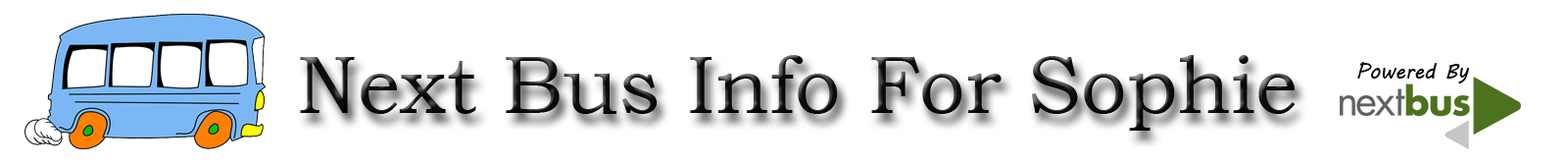
<style>
.page{position:relative;width:1568px;height:165px;background:#ffffff}
.page>*{position:absolute;margin:0}
.t1{font:81.7px "BookmanOldStyle";color:#0c0d0d}
.t2{font:20.4px "MVBoli";color:#080808}
</style>
<div class="page">
<p class="t1" style="left:300px;top:55px;width:996px;height:75px">Next Bus Info For Sophie</p>
<p class="t2" style="left:1357px;top:62px;width:112px;height:21px">Powered By</p>
</div>
